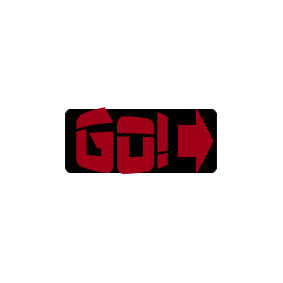
<style>
.page{position:relative;width:283px;height:283px;background:#ffffff}
.page>*{position:absolute;margin:0}
.t1{font:72px "ARDESTINE";color:#9f0017}
</style>
<div class="page">
<p class="t1" style="left:76px;top:107px;width:92px;height:67px">Go!</p>
</div>
